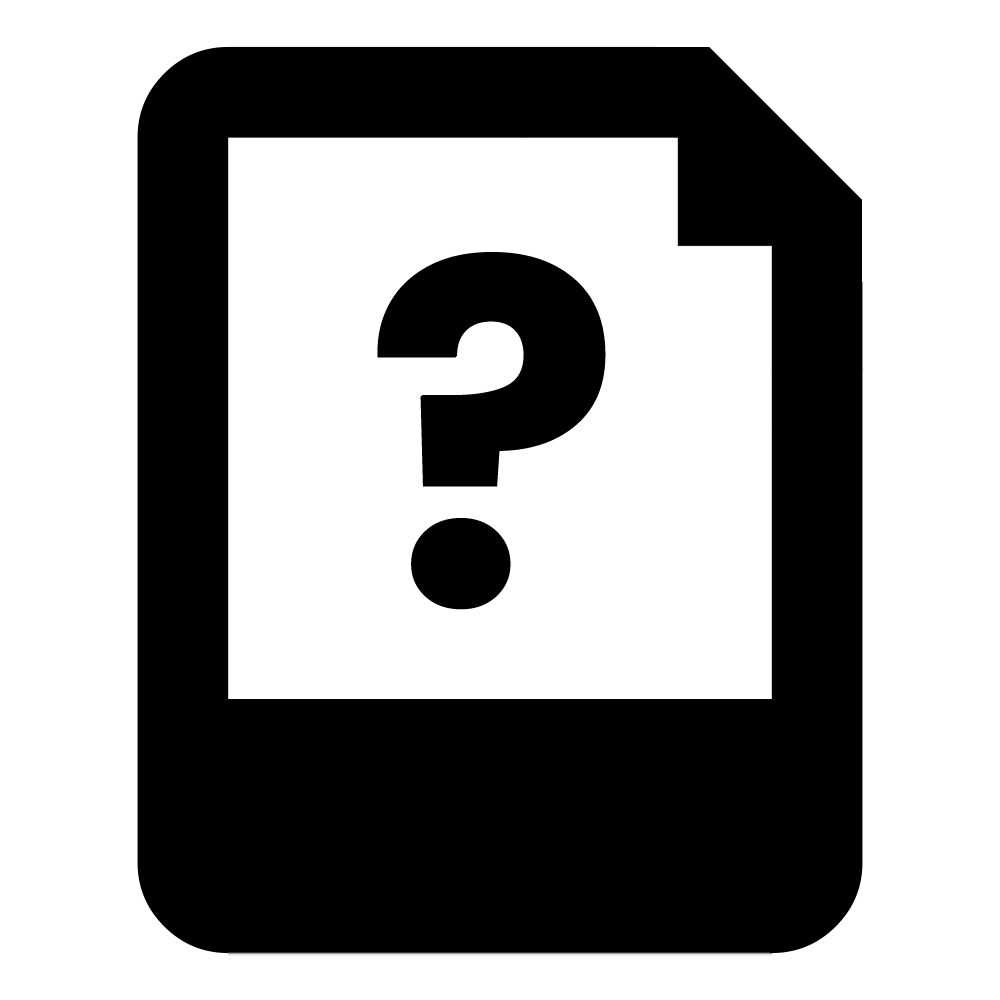
<style>
.page{position:relative;width:1000px;height:1000px;background:#ffffff}
.page>*{position:absolute;margin:0}
.t1{font:472.4px "Poppins-Bold";color:#000000;font-weight:bold}
</style>
<div class="page">
<p class="t1" style="left:377px;top:252px;width:229px;height:358px">?</p>
</div>
